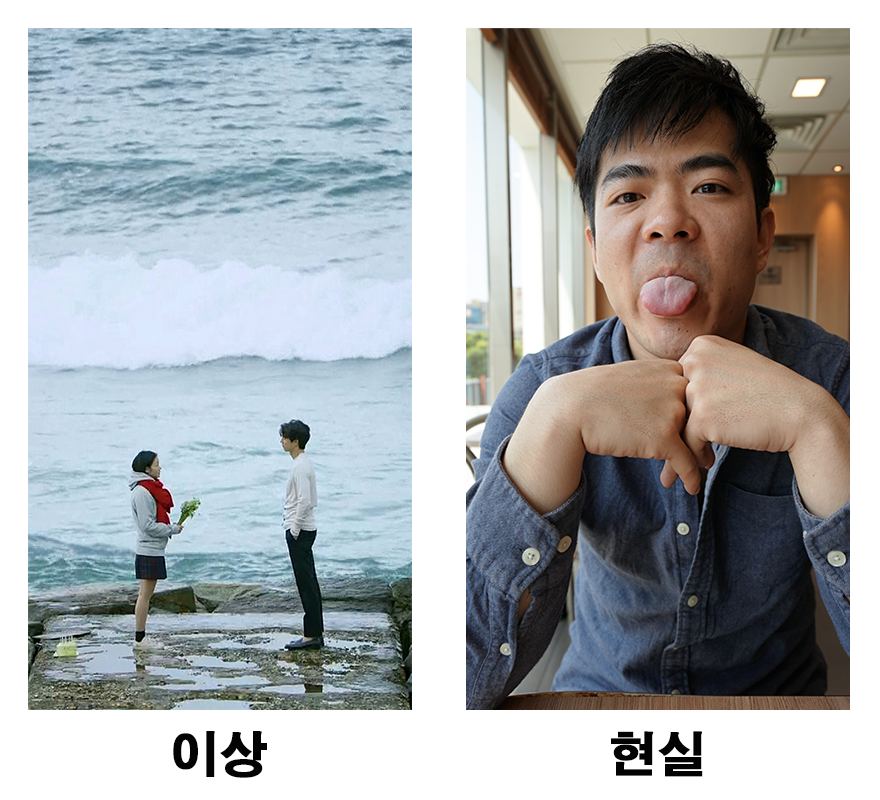
<style>
.page{position:relative;width:880px;height:800px;background:#ffffff}
.page>*{position:absolute;margin:0}
.t1{font:48px "AdobeGothicStd-Bold";color:#030303;font-weight:bold}
</style>
<div class="page">
<p class="t1" style="left:173px;top:731px;width:94px;height:47px">이상</p>
<p class="t1" style="left:611px;top:731px;width:92px;height:46px">현실</p>
</div>
